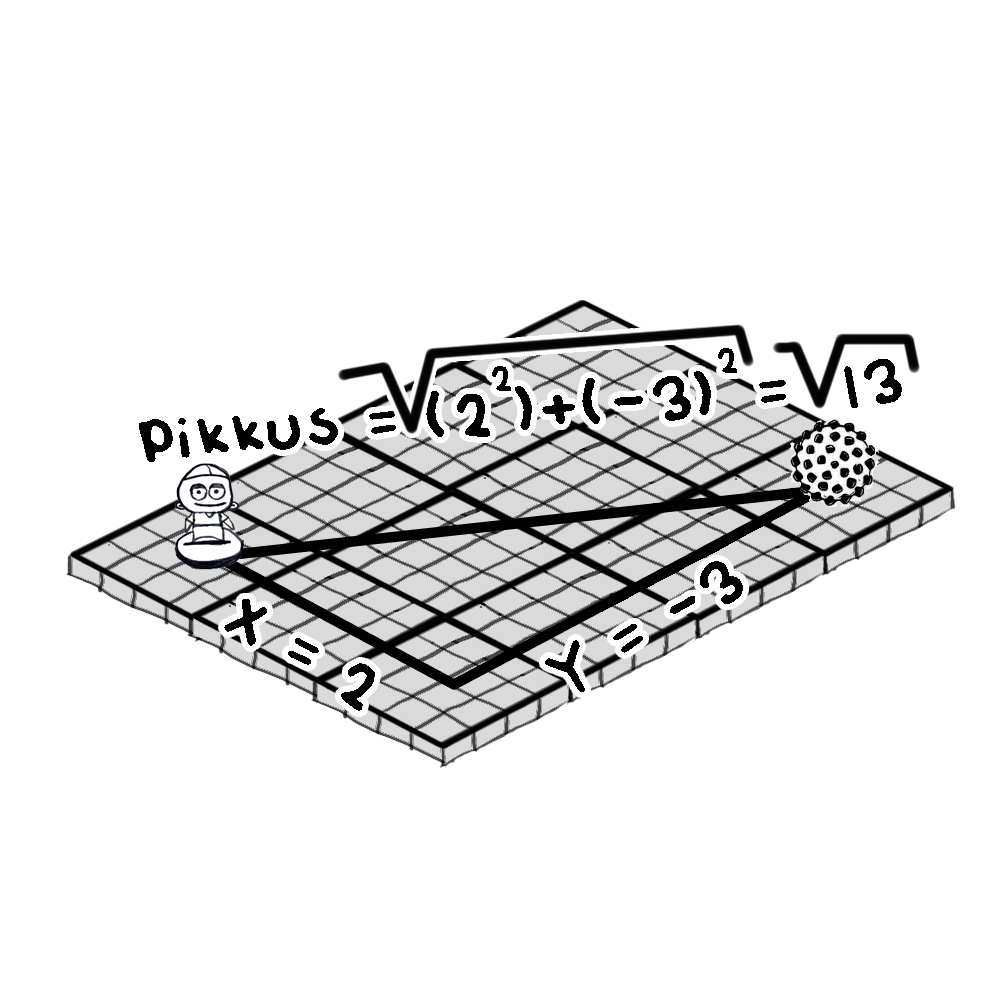
<style>
.page{position:relative;width:1000px;height:1000px;background:#ffffff}
.page>*{position:absolute;margin:0}
.t1{font:128px "LemonsCanFly";color:#000000}
</style>
<div class="page">
<p class="t1" style="left:139px;top:348px;width:763px;height:114px;rotate:-5deg">pikkus = (22)+(-3)2 =  13</p>
<p class="t1" style="left:545px;top:561px;width:198px;height:131px;rotate:-30deg">Y = -3</p>
<p class="t1" style="left:224px;top:599px;width:151px;height:112px;rotate:30deg">X = 2</p>
</div>
